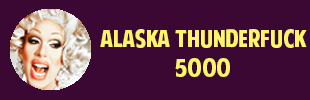
<style>
.page{position:relative;width:310px;height:100px;background:#3b0833}
.page>*{position:absolute;margin:0}
.t1{font:24px "AmericanPurpose";color:#fff568}
.t2{font:24px "Tahoma";color:#ffffff}
</style>
<div class="page">
<p class="t1" style="left:100px;top:29px;width:207px;height:48px;text-align:center"><span class="t2"><br></span>Alaska Thunderfuck 5000</p>
</div>
